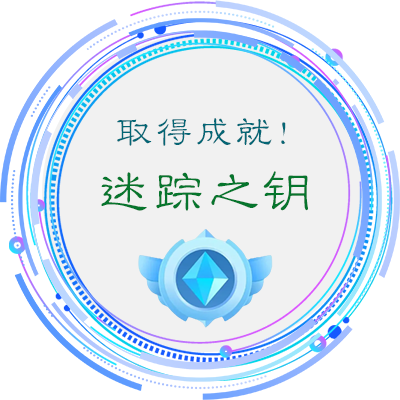
<style>
.page{position:relative;width:400px;height:400px;background:#f1f1f1}
.page>*{position:absolute;margin:0}
.t1{font:40px "STLibianSC-Regular";letter-spacing:0.005em;color:#046675}
.t2{font:55px "STLibianSC-Regular";color:#06752d}
</style>
<div class="page">
<p class="t1" style="left:117px;top:118px;width:169px;height:28px">取得成就！</p>
<p class="t2" style="left:101px;top:171px;width:207px;height:40px">迷踪之钥</p>
</div>
